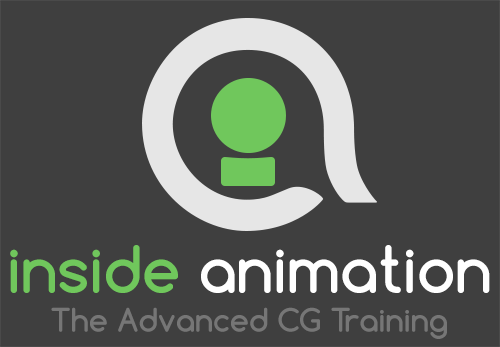
<style>
.page{position:relative;width:500px;height:347px;background:#3f3f3f}
.page>*{position:absolute;margin:0}
.t1{font:61.6px "Comfortaa-Bold";color:#ffffff}
.t2{font:61.6px "Comfortaa-Bold";color:#70c75c}
.t3{font:30.8px "Comfortaa-Bold";color:#767676}
</style>
<div class="page">
<p class="t1" style="left:10px;top:245px;width:480px;height:48px"><span class="t2">inside</span> animation</p>
<p class="t3" style="left:51px;top:307px;width:396px;height:32px">The Advanced CG Training</p>
</div>
